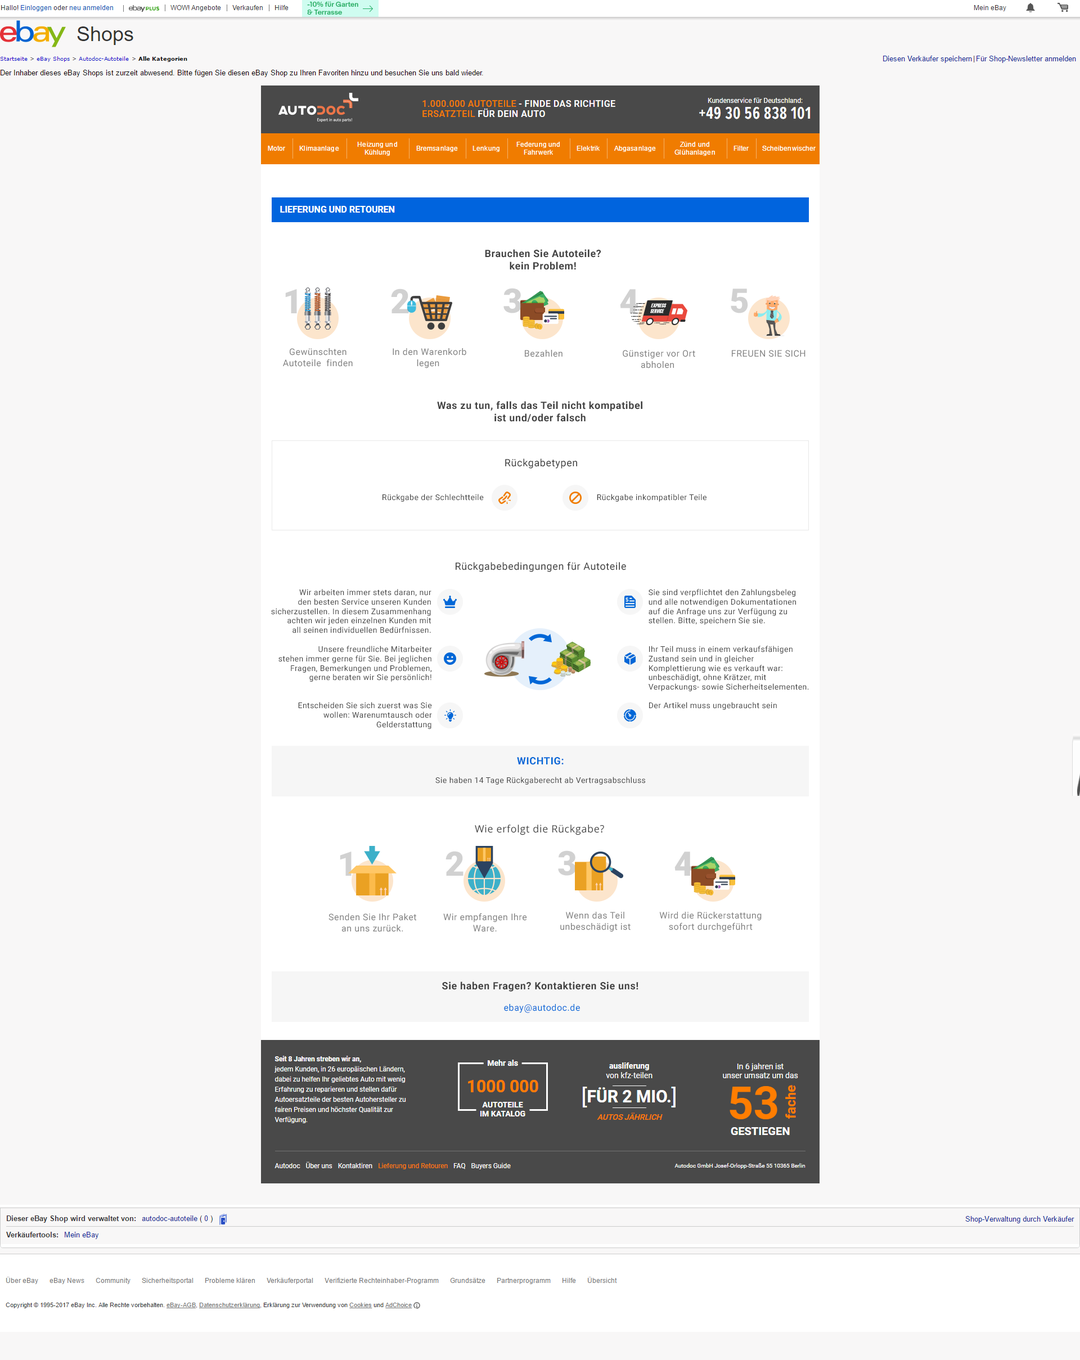
<style>
.page{position:relative;width:1080px;height:1360px;background:#f8f7f7}
.page>*{position:absolute;margin:0}
.t1{font:10.1px "Roboto-Bold";letter-spacing:0.035em;color:#414141}
.t2{font:33.8px "Roboto-Black";letter-spacing:0.035em;color:#d1d1d1}
.t3{font:9px "Roboto-Regular";letter-spacing:0.035em;color:#808080}
.t4{font:9px "Roboto-Regular";letter-spacing:0.035em;color:#808080;text-transform:uppercase}
.t5{font:10.1px "Roboto-Regular";letter-spacing:0.035em;color:#414141}
.t6{font:7.9px "Roboto-Regular";letter-spacing:0.035em;color:#414141}
.t7{font:10.1px "Roboto-Bold";letter-spacing:0.035em;color:#0067d7;text-transform:uppercase}
.t8{font:10.1px "OpenSans";letter-spacing:0.035em;color:#414141}
.t9{font:9px "Roboto-Regular";letter-spacing:0.035em;color:#0067d7}
</style>
<div class="page">
<p class="t1" style="left:485px;top:249px;width:116px;height:21px;text-align:center">Brauchen Sie Autoteile?<br>kein Problem!</p>
<p class="t2" style="left:285px;top:289px;width:12px;height:24px">1</p>
<p class="t2" style="left:391px;top:289px;width:18px;height:24px">2</p>
<p class="t2" style="left:503px;top:288px;width:18px;height:25px">3</p>
<p class="t2" style="left:620px;top:289px;width:18px;height:24px">4</p>
<p class="t2" style="left:731px;top:289px;width:17px;height:24px">5</p>
<p class="t3" style="left:283px;top:348px;width:70px;height:19px;text-align:center">Gewünschten<br>Autoteile  finden</p>
<p class="t3" style="left:393px;top:348px;width:73px;height:20px;text-align:center">In den Warenkorb<br>legen</p>
<p class="t3" style="left:525px;top:350px;width:37px;height:7px">Bezahlen</p>
<p class="t3" style="left:623px;top:350px;width:72px;height:18px;text-align:center">Günstiger vor Ort<br>abholen</p>
<p class="t4" style="left:732px;top:350px;width:74px;height:7px">Freuen Sie sich</p>
<p class="t1" style="left:437px;top:401px;width:205px;height:21px;text-align:center">Was zu tun, falls das Teil nicht kompatibel<br>ist und/oder falsch</p>
<p class="t5" style="left:505px;top:458px;width:72px;height:11px">Rückgabetypen</p>
<p class="t6" style="left:382px;top:494px;width:102px;height:8px">Rückgabe der Schlechtteile</p>
<p class="t6" style="left:597px;top:494px;width:109px;height:8px">Rückgabe inkompatibler Teile</p>
<p class="t5" style="left:456px;top:562px;width:170px;height:10px">Rückgabebedingungen für Autoteile</p>
<p class="t6" style="left:271px;top:589px;width:160px;height:44px;text-align:right">Wir arbeiten immer stets daran, nur<br>den besten Service unseren Kunden<br>sicherzustellen. In diesem Zusammenhang<br>achten wir jeden einzelnen Kunden mit<br>all seinen individuellen Bedürfnissen.</p>
<p class="t6" style="left:649px;top:589px;width:147px;height:36px">Sie sind verpflichtet den Zahlungsbeleg<br>und alle notwendigen Dokumentationen<br>auf die Anfrage uns zur Verfügung zu<br>stellen. Bitte, speichern Sie sie.</p>
<p class="t6" style="left:278px;top:646px;width:154px;height:36px;text-align:right">Unsere freundliche Mitarbeiter<br>stehen immer gerne für Sie. Bei jeglichen<br>Fragen, Bemerkungen und Problemen,<br>gerne beraten wir Sie persönlich!</p>
<p class="t6" style="left:649px;top:646px;width:160px;height:45px">Ihr Teil muss in einem verkaufsfähigen<br>Zustand sein und in gleicher<br>Komplettierung wie es verkauft war:<br>unbeschädigt, ohne Krätzer, mit<br>Verpackungs- sowie Sicherheitselementen.</p>
<p class="t6" style="left:298px;top:702px;width:134px;height:27px;text-align:right">Entscheiden Sie sich zuerst was Sie<br>wollen: Warenumtausch oder<br>Gelderstattung</p>
<p class="t6" style="left:649px;top:702px;width:128px;height:8px">Der Artikel muss ungebraucht sein</p>
<p class="t7" style="left:517px;top:757px;width:47px;height:8px">Wichtig:</p>
<p class="t6" style="left:435px;top:777px;width:210px;height:8px">Sie haben 14 Tage Rückgaberecht ab Vertragsabschluss</p>
<p class="t8" style="left:475px;top:825px;width:129px;height:10px">Wie erfolgt die Rückgabe?</p>
<p class="t2" style="left:340px;top:852px;width:12px;height:24px">1</p>
<p class="t2" style="left:446px;top:851px;width:18px;height:25px">2</p>
<p class="t2" style="left:558px;top:850px;width:18px;height:26px">3</p>
<p class="t2" style="left:674px;top:852px;width:18px;height:24px">4</p>
<p class="t3" style="left:328px;top:914px;width:88px;height:18px;text-align:center">Senden Sie Ihr Paket<br>an uns zurück.</p>
<p class="t3" style="left:443px;top:913px;width:84px;height:19px;text-align:center">Wir empfangen Ihre<br>Ware.</p>
<p class="t3" style="left:560px;top:912px;width:71px;height:20px;text-align:center">Wenn das Teil<br>unbeschädigt ist</p>
<p class="t3" style="left:659px;top:912px;width:103px;height:20px;text-align:center">Wird die Rückerstattung<br>sofort durchgeführt</p>
<p class="t1" style="left:442px;top:982px;width:196px;height:10px">Sie haben Fragen? Kontaktieren Sie uns!</p>
<p class="t9" style="left:504px;top:1004px;width:76px;height:9px">ebay@autodoc.de</p>
</div>
